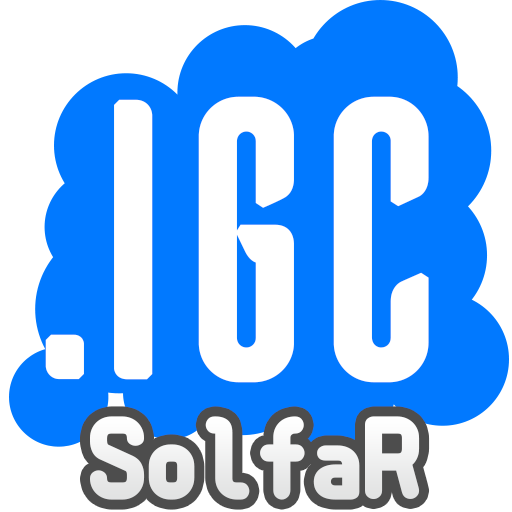
<style>
.page{position:relative;width:512px;height:512px;background:#ffffff}
.page>*{position:absolute;margin:0}
.t1{font:384.2px "Ailerons-Regular";letter-spacing:-0.28em;color:#ffffff;font-weight:bold}
.t2{font:384.2px "Ailerons-Regular";letter-spacing:-0.4em;color:#ffffff;font-weight:bold}
.t3{font:112.6px "AMPixelCodingMN-Mediana";letter-spacing:-0.04em;color:#ffffff;font-weight:bold}
</style>
<div class="page">
<p class="t1" style="left:45px;top:96px;width:384px;height:287px"><span class="t2">.</span>IGC</p>
<p class="t3" style="left:90px;top:416px;width:330px;height:84px">SolfaR</p>
</div>
